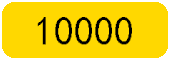
<style>
.page{position:relative;width:170px;height:60px;background:#ffd800}
.page>*{position:absolute;margin:0}
.t1{font:40px "¿¬Ìå";color:#000000}
</style>
<div class="page">
<p class="t1" style="left:37px;top:17px;width:95px;height:28px">10000</p>
</div>
